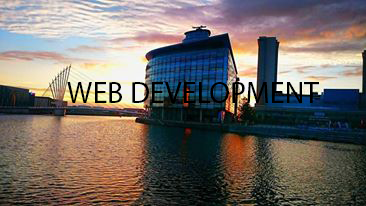
<style>
.page{position:relative;width:366px;height:206px}
.page>*{position:absolute;margin:0}
.t1{font:30px "MyriadPro-Regular";color:#000000}
</style>
<div class="page">
<p class="t1" style="left:67px;top:82px;width:252px;height:21px">WEB DEVELOPMENT</p>
</div>
